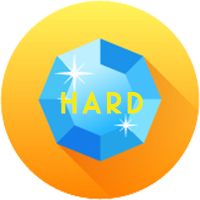
<style>
.page{position:relative;width:200px;height:200px;background:#ffffff}
.page>*{position:absolute;margin:0}
.t1{font:28.7px "Landmark-Inline";letter-spacing:0.1em;color:#f9eb06;font-weight:bold}
</style>
<div class="page">
<p class="t1" style="left:61px;top:91px;width:82px;height:23px">HARD</p>
</div>
